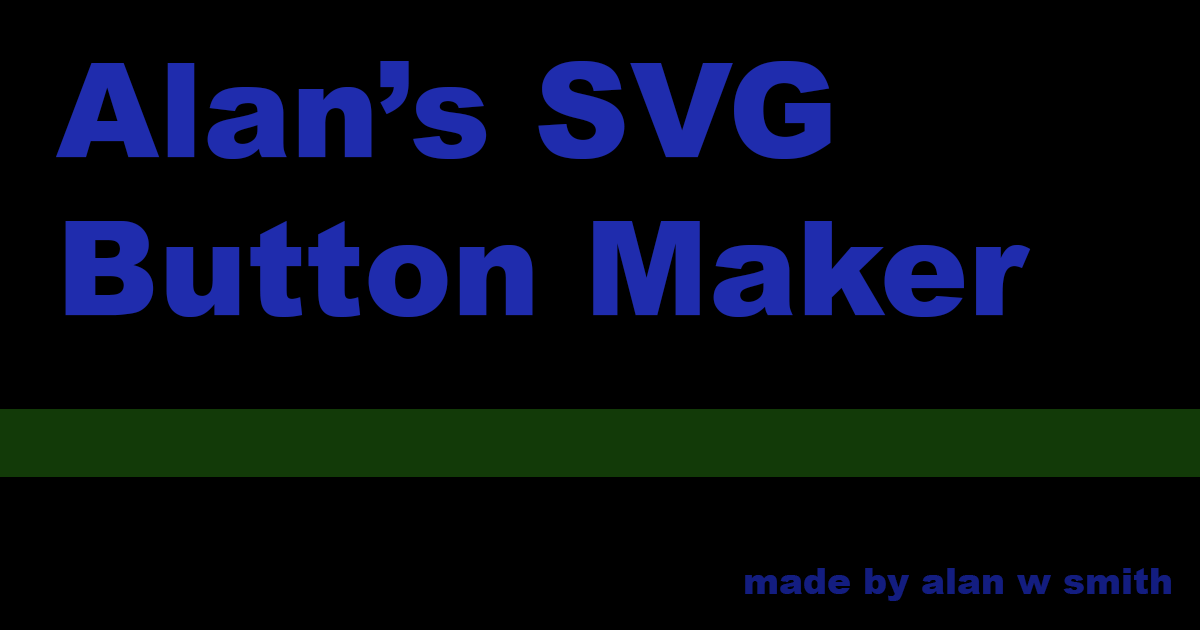
<style>
.page{position:relative;width:1200px;height:630px;background:#000000}
.page>*{position:absolute;margin:0}
.t1{font:132px "Arial-Black";color:#1f2cad}
.t2{font:36px "Arial-Black";color:#131d80}
</style>
<div class="page">
<p class="t1" style="left:56px;top:61px;width:975px;height:256px">Alan’s SVG<br>Button Maker</p>
<p class="t2" style="left:745px;top:568px;width:426px;height:33px">made by alan w smith</p>
</div>
